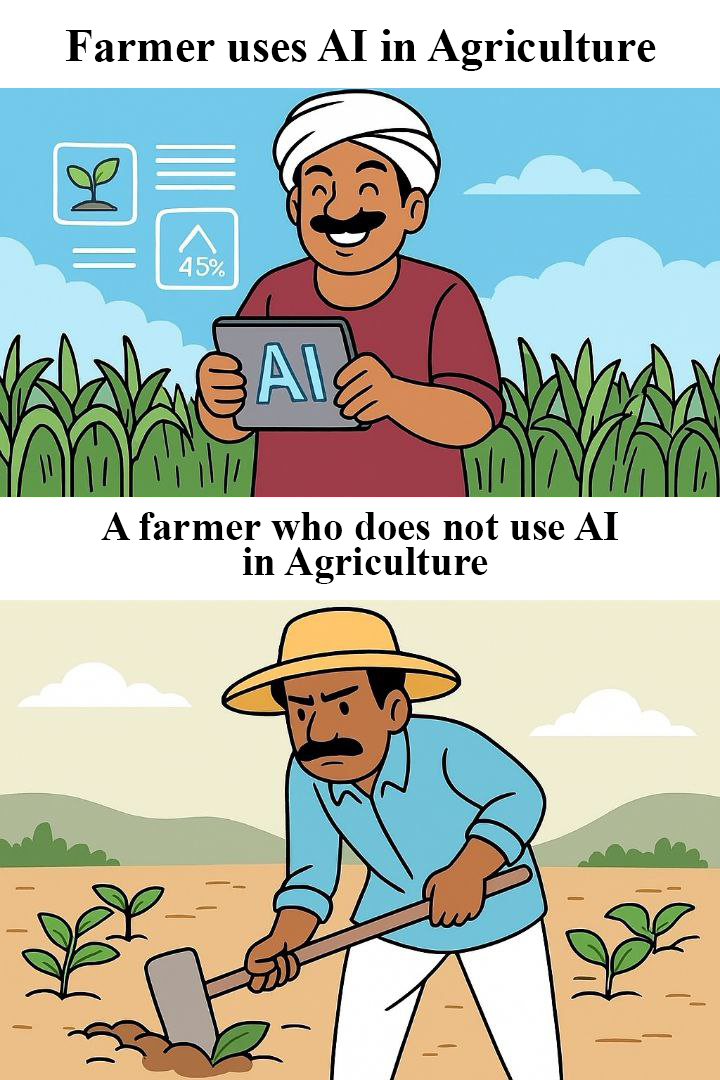
<style>
.page{position:relative;width:720px;height:1080px}
.page>*{position:absolute;margin:0}
.t1{font:46px "TimesNewRomanPS-BoldMT";color:#000000}
.t2{font:41px/35px "TimesNewRomanPS-BoldMT";color:#000000}
</style>
<div class="page">
<p class="t1" style="left:65px;top:29px;width:591px;height:42px">Farmer uses AI in Agriculture</p>
<p class="t2" style="left:101px;top:512px;width:517px;height:72px;text-align:center">A farmer who does not use AI<br> in Agriculture</p>
</div>
